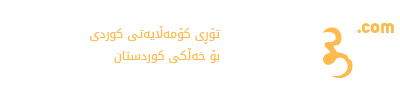
<style>
.page{position:relative;width:400px;height:90px;background:#ffffff}
.page>*{position:absolute;margin:0}
.t1{font:12px "DroidArabicKufi";color:#fdba4d}
.t2{font:88.6px "Mj_DamaaLight";color:#fdba4d}
.t3{font:19.3px "Uni-Sans-Bold";color:#fdba4d}
</style>
<div class="page">
<p class="t1" style="left:90px;top:26px;width:131px;height:37px;text-align:right">تۆڕی کۆمەڵایەتی کوردی<br>بۆ خەڵکی کوردستان</p>
<p class="t2" style="left:323px;top:27px;width:30px;height:51px;rotate:-90deg">س</p>
<p class="t3" style="left:357px;top:22px;width:37px;height:11px">.com</p>
</div>
